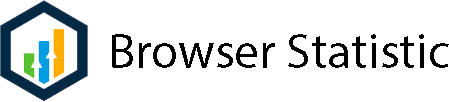
<style>
.page{position:relative;width:449px;height:102px;background:#ffffff}
.page>*{position:absolute;margin:0}
.t1{font:50px "MyriadPro-Regular";color:#000000}
</style>
<div class="page">
<p class="t1" style="left:112px;top:34px;width:337px;height:34px">Browser Statistic</p>
</div>
